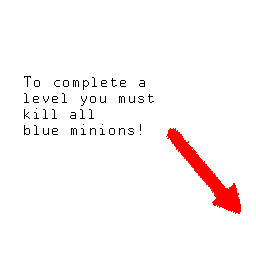
<style>
.page{position:relative;width:256px;height:256px;background:#ffffff}
.page>*{position:absolute;margin:0}
.t1{font:13.3px "OCRAStd";color:#000000}
</style>
<div class="page">
<p class="t1" style="left:24px;top:76px;width:130px;height:59px">To complete a <br>level you must <br>kill all<br>blue minions!</p>
</div>
